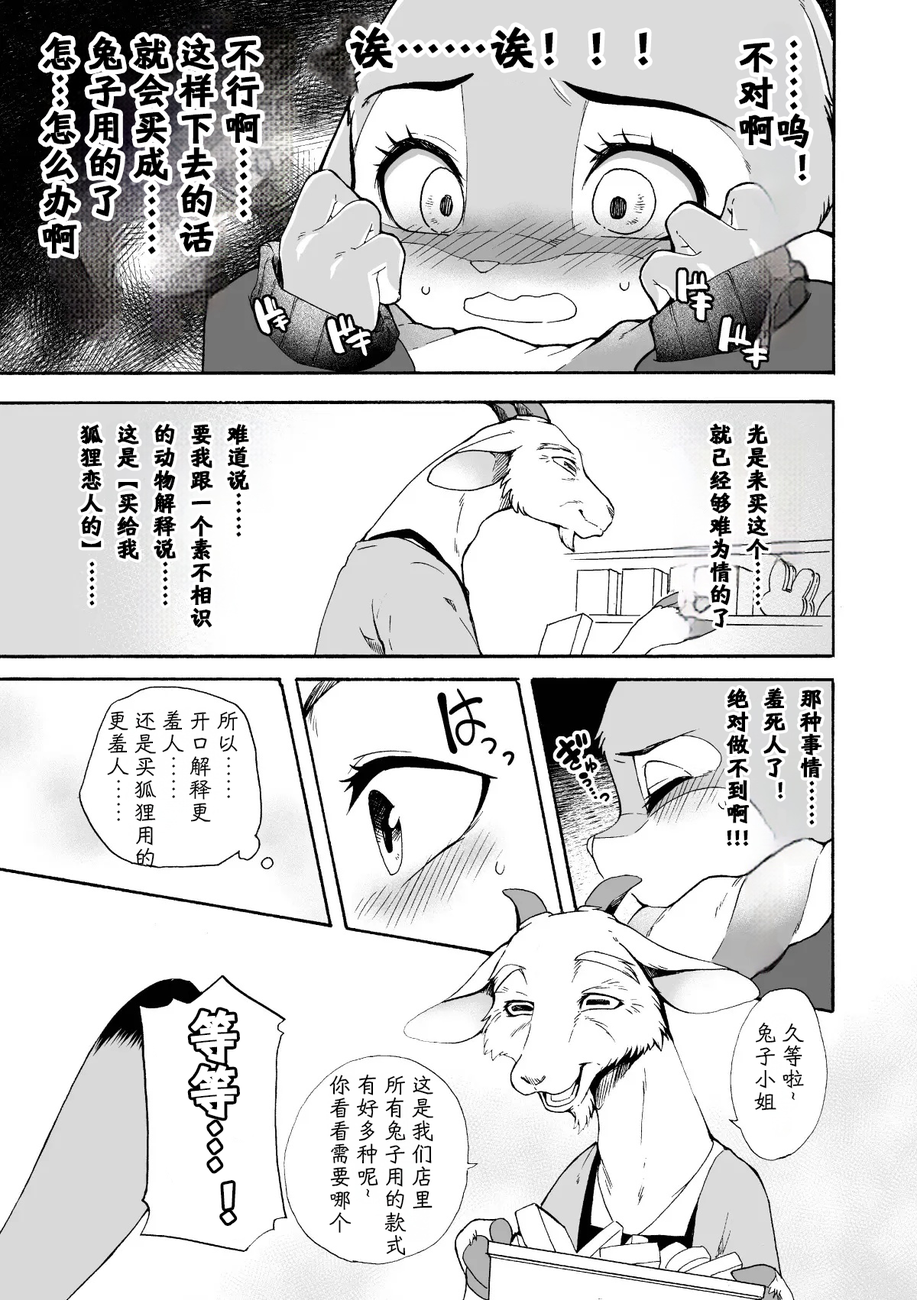
<style>
.page{position:relative;width:917px;height:1300px;background:#ffffff}
.page>*{position:absolute;margin:0}
.t1{font:45.8px "HYShiWei75U";color:#000000;font-weight:bold}
.t2{font:36.7px/45.8px "HYShiWei75U";color:#000000;font-weight:bold}
.t3{font:36.7px/36.7px "HYShiWei75U";color:#000000;font-weight:bold}
.t4{font:22.9px/36.7px "HYShiWei75U";color:#000000;font-weight:bold}
.t5{font:22.9px "HYShiWei55U";color:#000000}
.t6{font:22.9px "HYShiWei75U";color:#000000;font-weight:bold}
</style>
<div class="page">
<p class="t1" style="left:350px;top:27px;width:298px;height:42px">诶……诶！！！</p>
<p class="t2" style="left:42px;top:36px;width:219px;height:218px">不行啊……<br>这样下去的话<br>就会买成……<br>兔子用的了<br>怎…怎么办啊</p>
<p class="t3" style="left:739px;top:40px;width:70px;height:141px">……呜！<br>不对啊</p>
<p class="t4" style="left:80px;top:424px;width:169px;height:204px">难道说……<br>要我跟一个素不相识<br>的动物解释说……<br>这是【买给我<br>狐狸恋人的】……</p>
<p class="t4" style="left:709px;top:423px;width:60px;height:205px">光是来买这个……<br>就已经够难为情的了</p>
<p class="t4" style="left:726px;top:688px;width:96px;height:137px">那种事情……<br>羞死人了！<br>绝对做不到啊</p>
<p class="t5" style="left:107px;top:710px;width:131px;height:158px">所以……<br>开口解释更<br>羞人……<br>还是买狐狸用的<br>更羞人……</p>
<p class="t6" style="left:727px;top:830px;width:22px;height:17px">!!!</p>
<p class="t5" style="left:754px;top:1022px;width:50px;height:89px">久等啦~<br>兔子小姐</p>
<p class="t5" style="left:329px;top:1074px;width:104px;height:182px">这是我们店里<br>所有兔子用的款式<br>有好多种呢~<br>你看看需要哪个</p>
</div>
